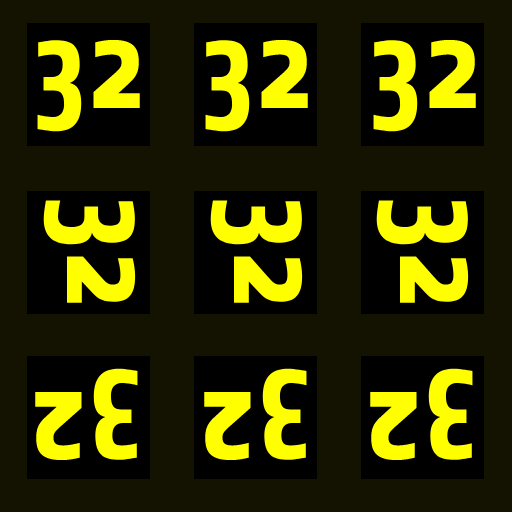
<style>
.page{position:relative;width:512px;height:512px;background:#141301}
.page>*{position:absolute;margin:0}
.t1{font:130px "Share-BoldOSF";color:#ffff00}
</style>
<div class="page">
<p class="t1" style="left:37px;top:39px;width:103px;height:93px">32</p>
<p class="t1" style="left:205px;top:39px;width:103px;height:93px">32</p>
<p class="t1" style="left:373px;top:39px;width:103px;height:93px">32</p>
<p class="t1" style="left:43px;top:200px;width:93px;height:103px;rotate:90deg">32</p>
<p class="t1" style="left:210px;top:200px;width:93px;height:103px;rotate:90deg">32</p>
<p class="t1" style="left:376px;top:200px;width:93px;height:103px;rotate:90deg">32</p>
<p class="t1" style="left:35px;top:368px;width:103px;height:93px;rotate:-180deg">32</p>
<p class="t1" style="left:204px;top:368px;width:103px;height:93px;rotate:-180deg">32</p>
<p class="t1" style="left:370px;top:368px;width:103px;height:93px;rotate:-180deg">32</p>
</div>
